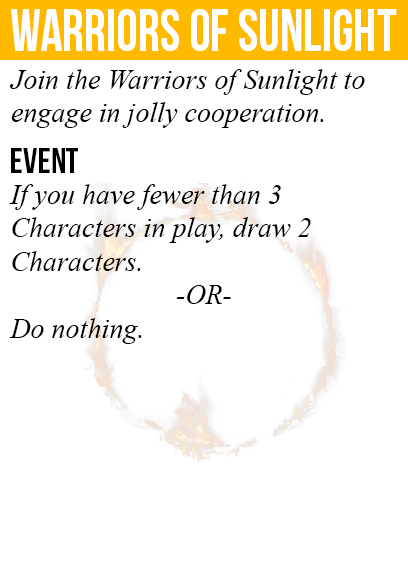
<style>
.page{position:relative;width:408px;height:585px;background:#ffffff}
.page>*{position:absolute;margin:0}
.t1{font:60px "BebasNeue";color:#ffffff;scale:0.91 1}
.t2{font:28px "TimesNewRomanPS-ItalicMT";color:#000000}
.t3{font:36px "BebasNeue";color:#000000}
</style>
<div class="page">
<p class="t1" style="left:11px;top:9px;width:386px;height:42px">warriors of sunlight</p>
<p class="t2" style="left:10px;top:69px;width:355px;height:59px">Join the Warriors of Sunlight to<br>engage in jolly cooperation.</p>
<p class="t3" style="left:11px;top:148px;width:67px;height:25px">event</p>
<p class="t2" style="left:9px;top:184px;width:302px;height:160px">If you have fewer than 3<br>Characters in play, draw 2<br>Characters.<br><br>Do nothing.</p>
<p class="t2" style="left:176px;top:285px;width:55px;height:19px">-OR-</p>
</div>
